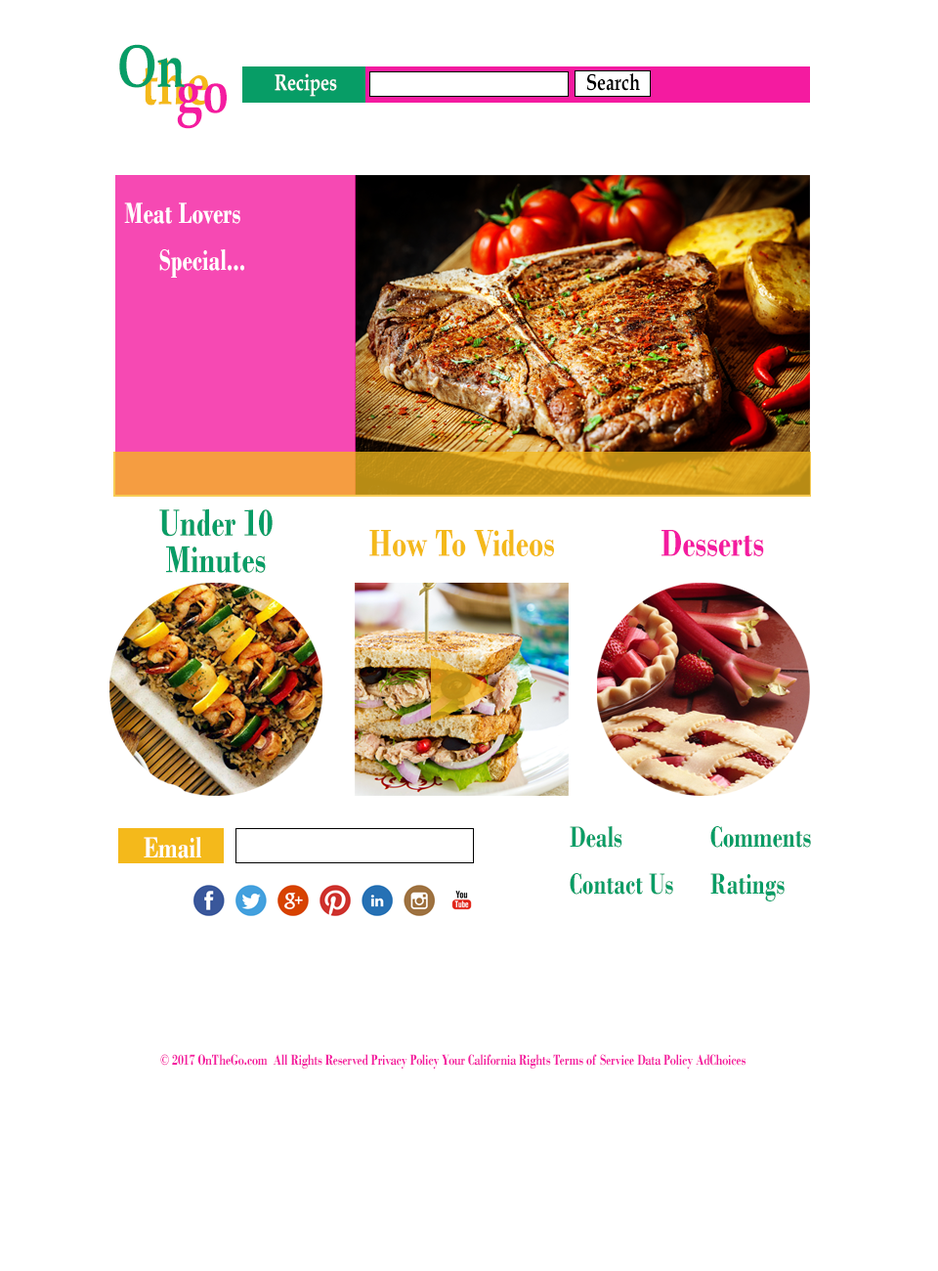
<style>
.page{position:relative;width:938px;height:1271px;background:#ffffff}
.page>*{position:absolute;margin:0}
.t1{font:61px "BookAntiqua-Bold";color:#079d66;scale:0.77 1}
.t2{font:61px "BookAntiqua-Bold";scale:0.77 1}
.t3{font:22.9px "BookAntiqua-Bold";color:#ffffff;scale:0.77 1}
.t4{font:22.9px "BookAntiqua-Bold";color:#000000;scale:0.77 1}
.t5{font:61px "BookAntiqua-Bold";color:#f41ba0;scale:0.77 1}
.t6{font:30.5px/46.9px "BodoniMT-Bold";color:#ffffff;scale:0.77 1}
.t7{font:39.7px "BodoniMT-Bold";color:#079d66;scale:0.77 1}
.t8{font:39.7px "BodoniMT-Bold";color:#f4b91b;scale:0.77 1}
.t9{font:39.7px "BodoniMT-Bold";color:#f41ba0;scale:0.77 1}
.t10{font:30.5px/46.9px "BodoniMT-Bold";color:#079d66;scale:0.77 1}
.t11{font:30.5px "BodoniMT-Bold";color:#ffffff;scale:0.77 1}
.t12{font:15.2px "BodoniMT-Bold";color:#f41ba0;scale:0.77 1}
</style>
<div class="page">
<p class="t1" style="left:119px;top:44px;width:66px;height:44px">On</p>
<p class="t2" style="left:143px;top:60px;width:65px;height:46px">the</p>
<p class="t3" style="left:275px;top:73px;width:62px;height:24px">Recipes</p>
<p class="t4" style="left:586px;top:73px;width:54px;height:18px">Search</p>
<p class="t5" style="left:177px;top:83px;width:50px;height:46px">go</p>
<p class="t6" style="left:124px;top:202px;width:120px;height:76px">Meat Lovers <br> Special...</p>
<p class="t7" style="left:159px;top:508px;width:114px;height:65px;text-align:center">Under 10 <br>Minutes</p>
<p class="t8" style="left:369px;top:529px;width:185px;height:27px">How To Videos</p>
<p class="t9" style="left:662px;top:530px;width:102px;height:26px">Desserts</p>
<p class="t10" style="left:570px;top:826px;width:241px;height:75px">Deals   Comments<br>Contact Us  Ratings</p>
<p class="t11" style="left:144px;top:837px;width:57px;height:21px">Email</p>
<p class="t12" style="left:160px;top:1054px;width:586px;height:14px">© 2017 OnTheGo.com  All Rights Reserved Privacy Policy Your California Rights Terms of Service Data Policy AdChoices</p>
</div>
